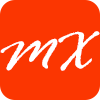
<style>
.page{position:relative;width:100px;height:100px;background:#fb3601}
.page>*{position:absolute;margin:0}
.t1{font:60px "RageItalic";color:#ffffff}
</style>
<div class="page">
<p class="t1" style="left:0px;top:31px;width:100px;height:40px">MX</p>
</div>
